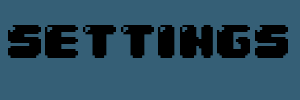
<style>
.page{position:relative;width:300px;height:100px;background:#355f76}
.page>*{position:absolute;margin:0}
.t1{font:40px "04b30";color:#000000}
</style>
<div class="page">
<p class="t1" style="left:8px;top:25px;width:280px;height:33px">SETTINGS</p>
</div>
